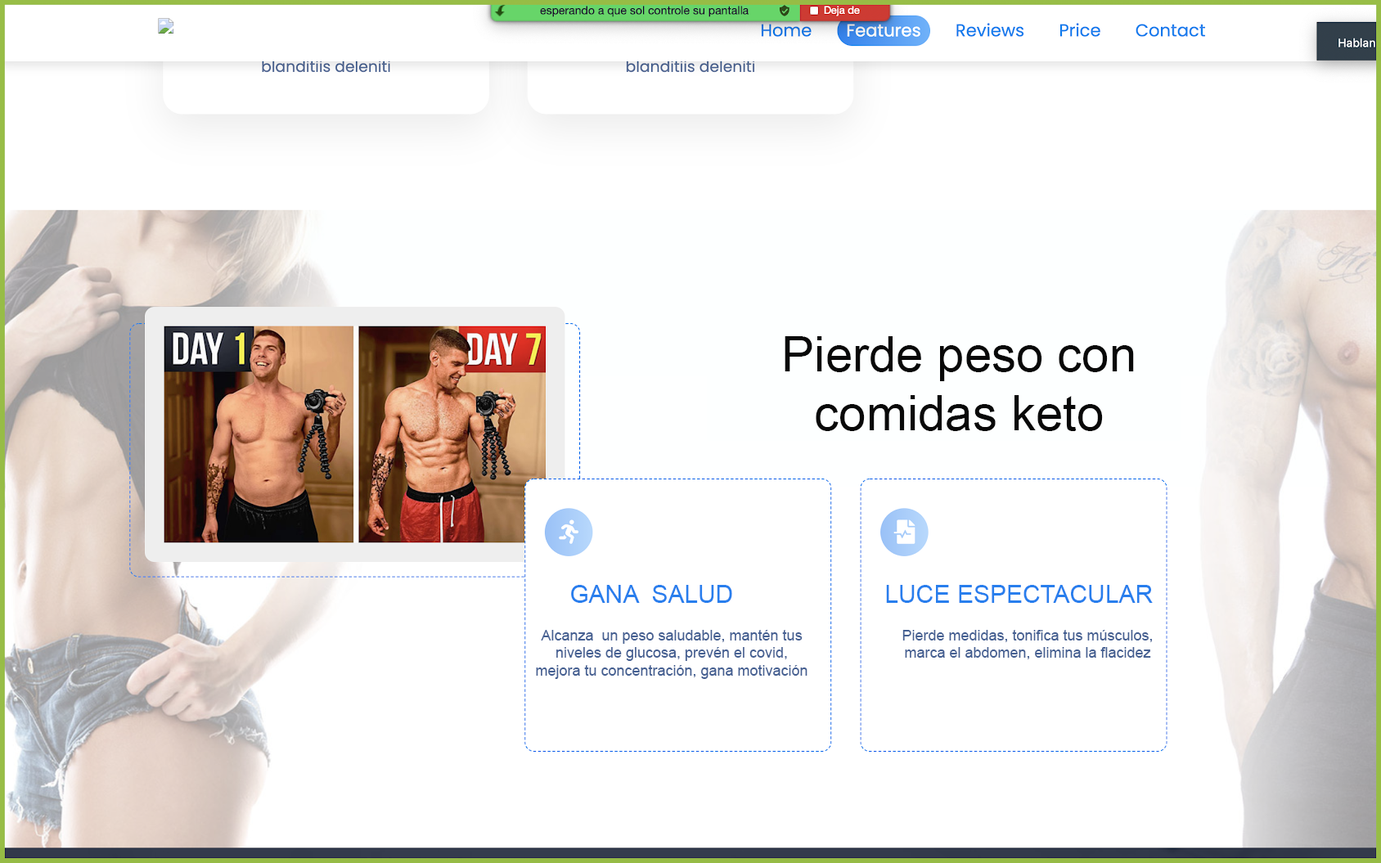
<style>
.page{position:relative;width:1381px;height:863px;background:#ffffff}
.page>*{position:absolute;margin:0}
.t1{font:49.1px "ArialMT";color:#090909}
.t2{font:24.5px "ArialMT";color:#287eed}
.t3{font:14.7px "ArialMT";color:#456092}
</style>
<div class="page">
<p class="t1" style="left:785px;top:336px;width:349px;height:95px;text-align:center">Pierde peso con     comidas keto</p>
<p class="t2" style="left:571px;top:585px;width:161px;height:18px">GANA  SALUD</p>
<p class="t2" style="left:886px;top:585px;width:267px;height:18px">LUCE ESPECTACULAR</p>
<p class="t3" style="left:536px;top:630px;width:272px;height:49px;text-align:center">Alcanza  un peso saludable, mantén tus niveles de glucosa, prevén el covid, mejora tu concentración, gana motivación</p>
<p class="t3" style="left:903px;top:630px;width:249px;height:30px;text-align:center">Pierde medidas, tonifica tus músculos, marca el abdomen, elimina la flacidez</p>
</div>
